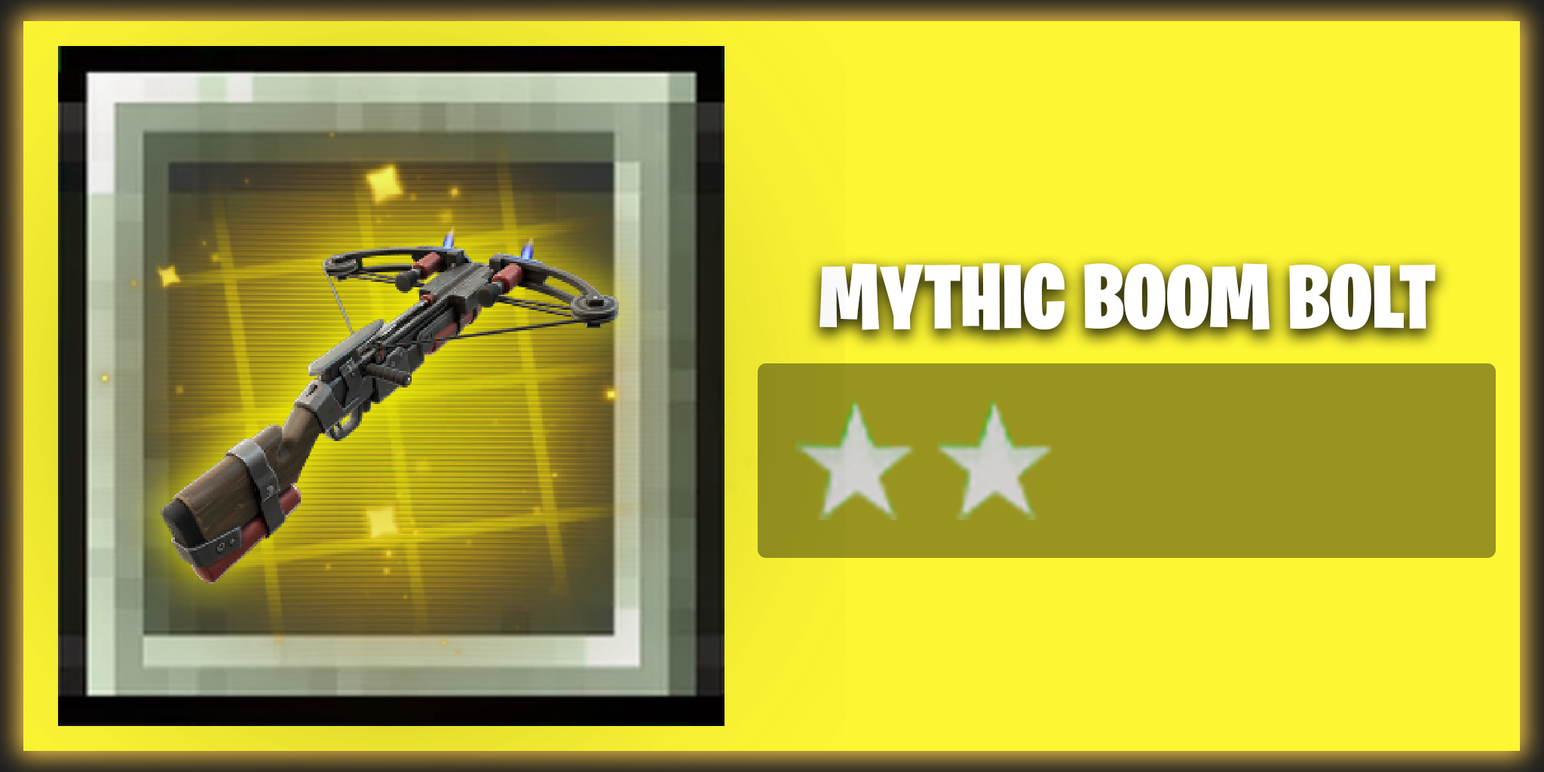
<style>
.page{position:relative;width:1544px;height:772px;background:#fdf633}
.page>*{position:absolute;margin:0}
.t1{font:90.5px "BurbankBigCondensed-Black";color:#ffffff}
</style>
<div class="page">
<p class="t1" style="left:820px;top:262px;width:616px;height:68px">MYTHIC BOOM BOLT</p>
</div>
